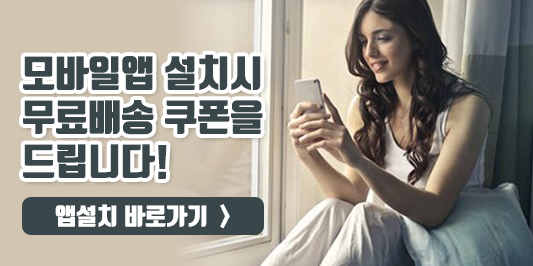
<style>
.page{position:relative;width:533px;height:266px}
.page>*{position:absolute;margin:0}
.t1{font:36.6px "TmonMonsoriBlack";color:#39474a}
.t2{font:23.2px "TmonMonsoriBlack";color:#ffffff}
</style>
<div class="page">
<p class="t1" style="left:23px;top:54px;width:240px;height:125px">모바일앱 설치시<br>무료배송 쿠폰을<br>드립니다!</p>
<p class="t2" style="left:55px;top:204px;width:175px;height:25px">앱설치 바로가기  &gt;</p>
</div>
